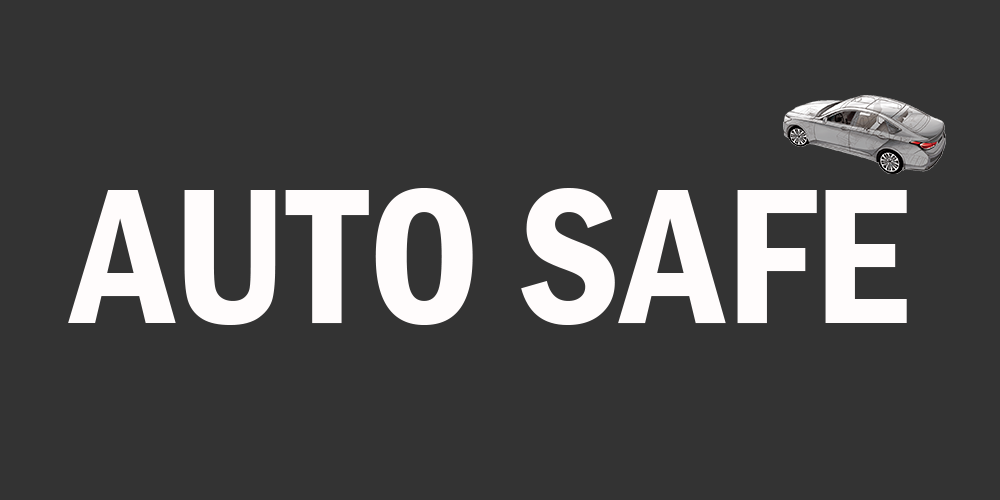
<style>
.page{position:relative;width:1000px;height:500px;background:#333333}
.page>*{position:absolute;margin:0}
.t1{font:200px "FranklinGothic-DemiCond";color:#fffcfc}
</style>
<div class="page">
<p class="t1" style="left:68px;top:188px;width:839px;height:137px">AUTO SAFE</p>
</div>
